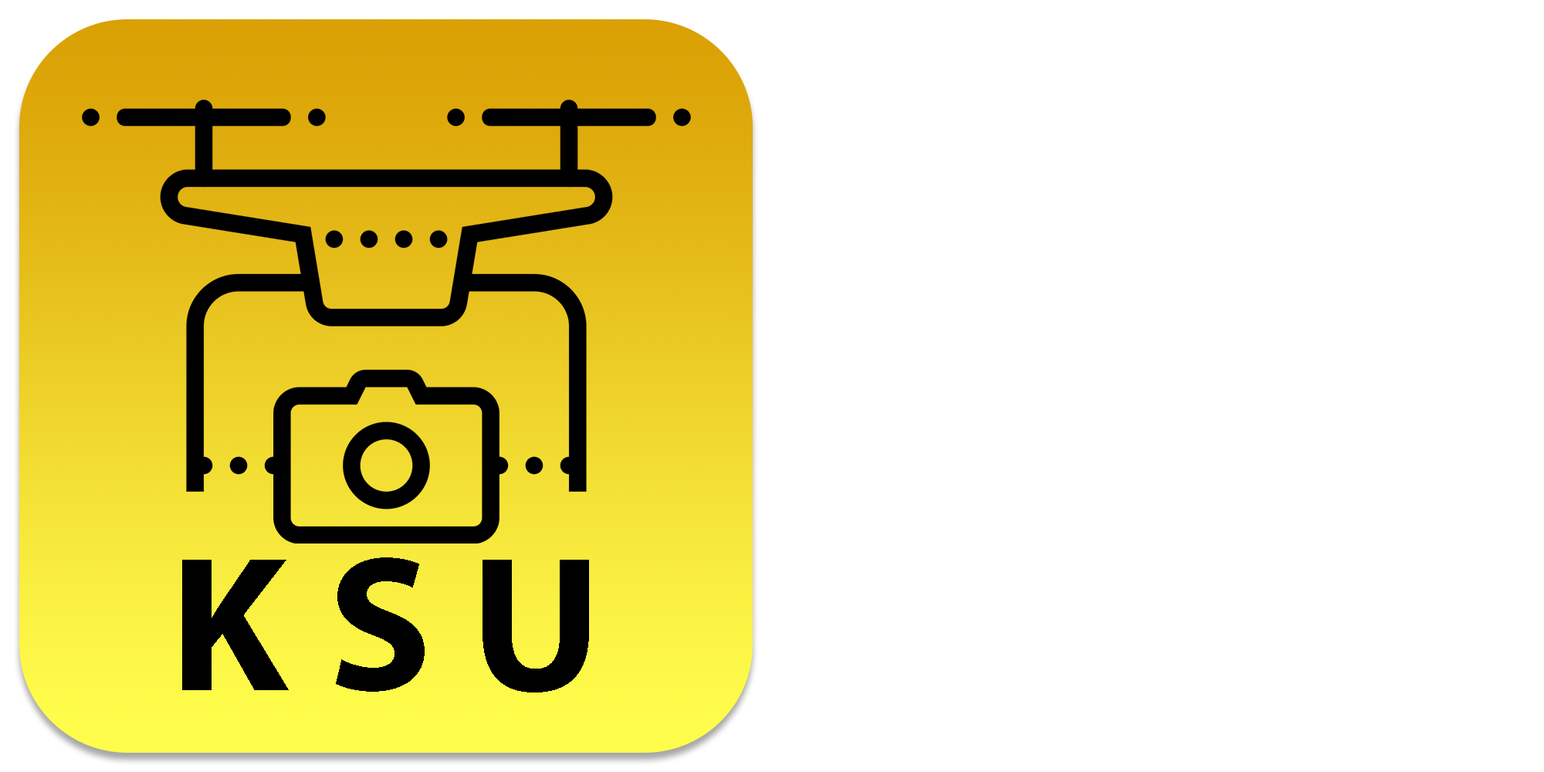
<style>
.page{position:relative;width:1544px;height:772px;background:#ffffff}
.page>*{position:absolute;margin:0}
.t1{font:193px "MyriadPro-Bold";color:#000000}
</style>
<div class="page">
<p class="t1" style="left:182px;top:557px;width:407px;height:136px">K S U</p>
</div>
